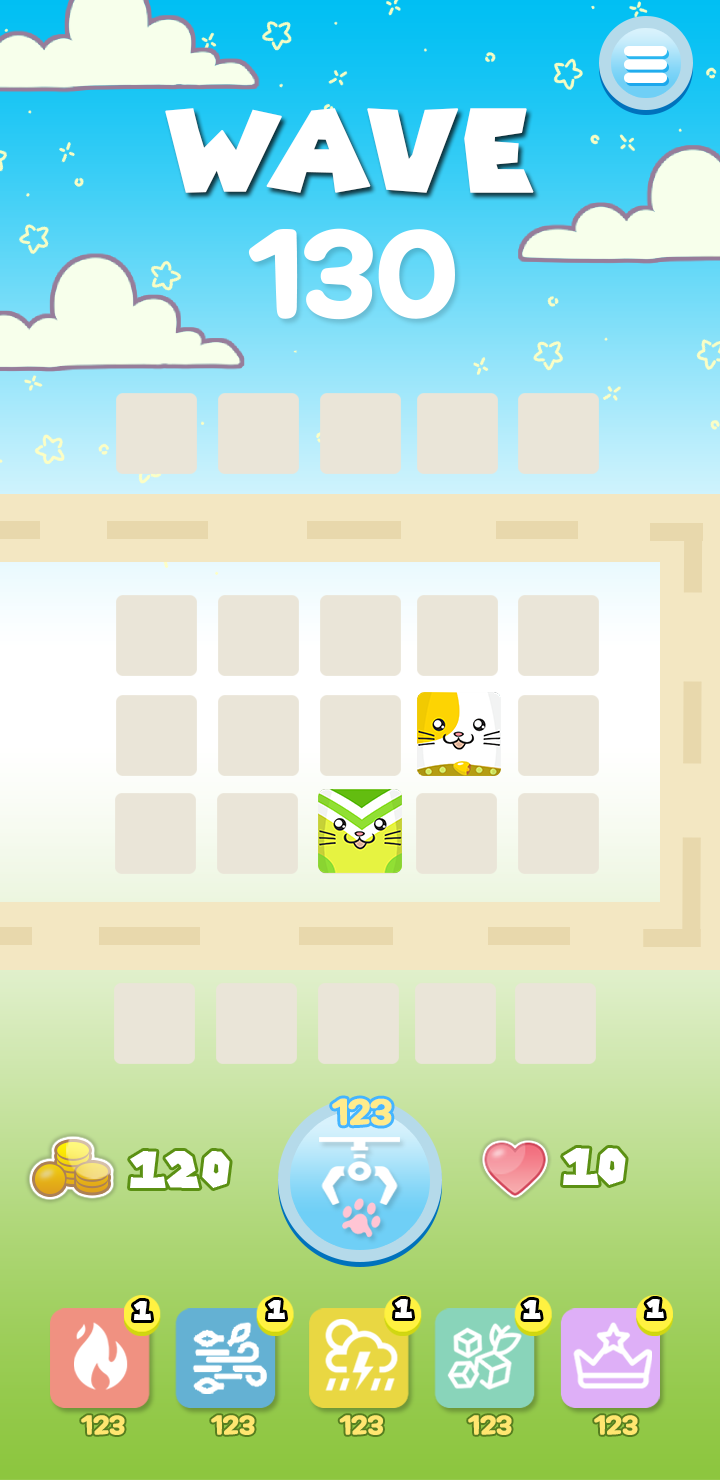
<style>
.page{position:relative;width:720px;height:1480px}
.page>*{position:absolute;margin:0}
.t1{font:111.9px "SuperMarioGalaxy";color:#ffffff;font-weight:bold}
.t2{font:35px "MaplestoryBold";color:#ffeb8c;font-weight:bold}
.t3{font:25px "SuperMarioGalaxy";color:#ffffff;font-weight:bold;scale:0.93 1}
.t4{font:25.6px "MaplestoryBold";color:#ffe670;font-weight:bold}
</style>
<div class="page">
<p class="t1" style="left:165px;top:108px;width:369px;height:85px">wave</p>
<p class="t2" style="left:332px;top:1098px;width:60px;height:28px">123</p>
<p class="t3" style="left:134px;top:1301px;width:17px;height:19px">1</p>
<p class="t3" style="left:268px;top:1300px;width:17px;height:19px">1</p>
<p class="t3" style="left:395px;top:1299px;width:17px;height:19px">1</p>
<p class="t3" style="left:523px;top:1300px;width:18px;height:19px">1</p>
<p class="t3" style="left:646px;top:1299px;width:18px;height:19px">1</p>
<p class="t4" style="left:81px;top:1415px;width:44px;height:20px">123</p>
<p class="t4" style="left:211px;top:1415px;width:44px;height:20px">123</p>
<p class="t4" style="left:339px;top:1415px;width:44px;height:20px">123</p>
<p class="t4" style="left:468px;top:1415px;width:44px;height:20px">123</p>
<p class="t4" style="left:594px;top:1415px;width:44px;height:20px">123</p>
</div>
